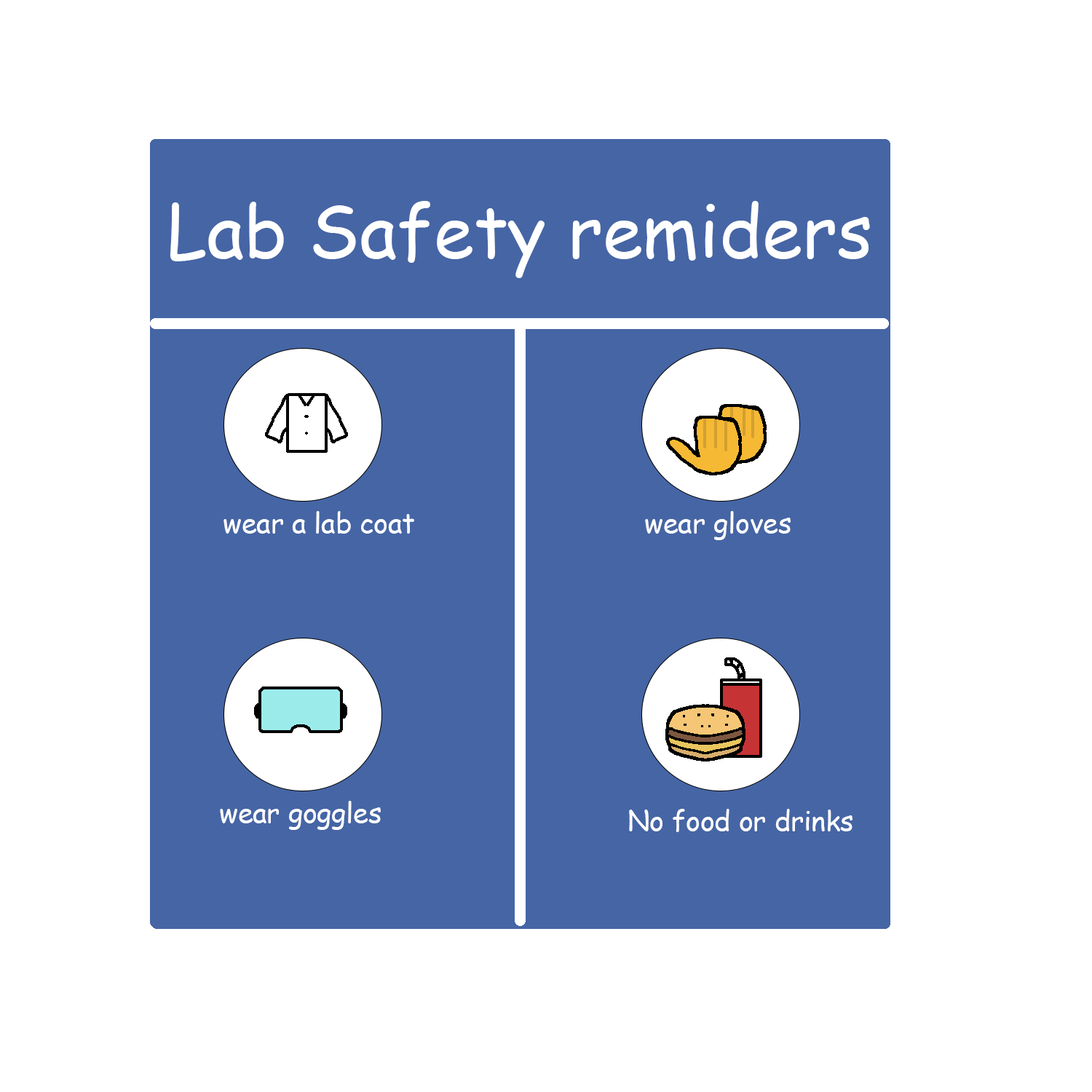
<style>
.page{position:relative;width:1092px;height:1092px;background:#ffffff}
.page>*{position:absolute;margin:0}
.t1{font:72.8px "ComicSansMS";color:#ffffff}
.t2{font:27.3px "ComicSansMS";color:#ffffff}
</style>
<div class="page">
<p class="t1" style="left:170px;top:201px;width:700px;height:77px">Lab Safety remiders</p>
<p class="t2" style="left:223px;top:511px;width:191px;height:23px">wear a lab coat</p>
<p class="t2" style="left:645px;top:511px;width:146px;height:29px">wear gloves</p>
<p class="t2" style="left:220px;top:801px;width:161px;height:29px">wear goggles</p>
<p class="t2" style="left:629px;top:809px;width:223px;height:23px">No food or drinks</p>
</div>
